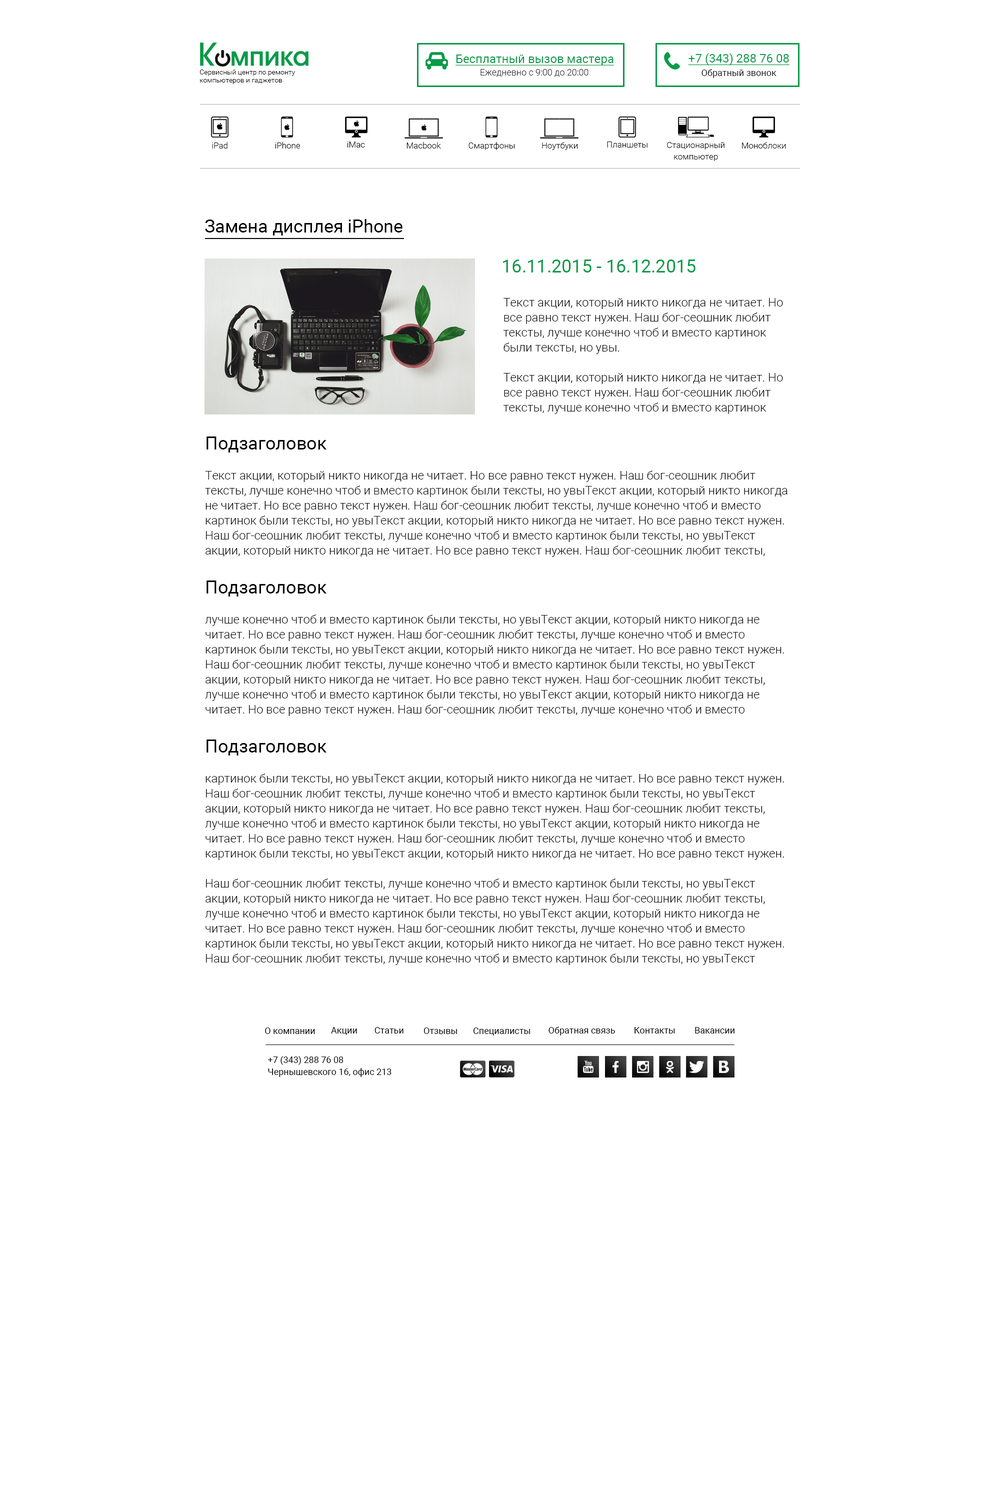
<style>
.page{position:relative;width:1000px;height:1500px;background:#ffffff}
.page>*{position:absolute;margin:0}
.t1{font:12px "Roboto-Regular";color:#099a48;text-decoration:underline}
.t2{font:7px/8px "Roboto-Light";color:#000000}
.t3{font:9px "Roboto-Light";color:#262626}
.t4{font:9px "Roboto-Regular";color:#1a1a1a}
.t5{font:8.5px "Roboto-Light";color:#000000}
.t6{font:8.5px/11.5px "Roboto-Light";color:#000000}
.t7{font:18px "Roboto-Regular";color:#000000}
.t8{font:18px "Roboto-Regular";color:#099a48}
.t9{font:12px/15px "Roboto-Light";color:#000000}
.t10{font:18px/24px "Roboto-Regular";color:#000000}
.t11{font:9px "Roboto-Regular";color:#000000}
</style>
<div class="page">
<p class="t1" style="left:688px;top:53px;width:102px;height:13px">+7 (343) 288 76 08</p>
<p class="t1" style="left:455px;top:54px;width:159px;height:12px">Бесплатный вызов мастера</p>
<p class="t2" style="left:200px;top:70px;width:96px;height:14px">Сервисный центр по ремонту<br>компьютеров и гаджетов</p>
<p class="t3" style="left:480px;top:69px;width:108px;height:8px">Ежедневно с 9:00 до 20:00</p>
<p class="t4" style="left:702px;top:69px;width:74px;height:9px">Обратный звонок</p>
<p class="t5" style="left:212px;top:142px;width:16px;height:6px">iPad</p>
<p class="t5" style="left:275px;top:142px;width:25px;height:6px">iPhone</p>
<p class="t5" style="left:347px;top:142px;width:18px;height:6px">iMac</p>
<p class="t5" style="left:406px;top:142px;width:35px;height:6px">Macbook</p>
<p class="t5" style="left:468px;top:142px;width:47px;height:8px">Смартфоны</p>
<p class="t5" style="left:542px;top:142px;width:36px;height:8px">Ноутбуки</p>
<p class="t5" style="left:607px;top:142px;width:41px;height:6px">Планшеты</p>
<p class="t6" style="left:667px;top:142px;width:57px;height:19px;text-align:center">Стационарный<br>компьютер</p>
<p class="t5" style="left:742px;top:142px;width:44px;height:6px">Моноблоки</p>
<p class="t7" style="left:205px;top:219px;width:197px;height:17px">Замена дисплея iPhone</p>
<p class="t8" style="left:503px;top:260px;width:193px;height:12px">16.11.2015 - 16.12.2015</p>
<p class="t9" style="left:503px;top:298px;width:280px;height:116px">Текст акции, который никто никогда не читает. Но все равно текст нужен. Наш бог-сеошник любит тексты, лучше конечно чтоб и вместо картинок были тексты, но увы.<br><br>Текст акции, который никто никогда не читает. Но все равно текст нужен. Наш бог-сеошник любит тексты, лучше конечно чтоб и вместо картинок были тексты, но увы</p>
<p class="t9" style="left:205px;top:436px;width:583px;height:529px"><span class="t10">Подзаголовок<br></span><br>Текст акции, который никто никогда не читает. Но все равно текст нужен. Наш бог-сеошник любит тексты, лучше конечно чтоб и вместо картинок были тексты, но увыТекст акции, который никто никогда не читает. Но все равно текст нужен. Наш бог-сеошник любит тексты, лучше конечно чтоб и вместо картинок были тексты, но увыТекст акции, который никто никогда не читает. Но все равно текст нужен. Наш бог-сеошник любит тексты, лучше конечно чтоб и вместо картинок были тексты, но увыТекст акции, который никто никогда не читает. Но все равно текст нужен. Наш бог-сеошник любит тексты, <br><br><span class="t10">Подзаголовок<br></span><br>лучше конечно чтоб и вместо картинок были тексты, но увыТекст акции, который никто никогда не читает. Но все равно текст нужен. Наш бог-сеошник любит тексты, лучше конечно чтоб и вместо картинок были тексты, но увыТекст акции, который никто никогда не читает. Но все равно текст нужен. Наш бог-сеошник любит тексты, лучше конечно чтоб и вместо картинок были тексты, но увыТекст акции, который никто никогда не читает. Но все равно текст нужен. Наш бог-сеошник любит тексты, лучше конечно чтоб и вместо картинок были тексты, но увыТекст акции, который никто никогда не читает. Но все равно текст нужен. Наш бог-сеошник любит тексты, лучше конечно чтоб и вместо <br><br><span class="t10">Подзаголовок<br></span><br>картинок были тексты, но увыТекст акции, который никто никогда не читает. Но все равно текст нужен. Наш бог-сеошник любит тексты, лучше конечно чтоб и вместо картинок были тексты, но увыТекст акции, который никто никогда не читает. Но все равно текст нужен. Наш бог-сеошник любит тексты, лучше конечно чтоб и вместо картинок были тексты, но увыТекст акции, который никто никогда не читает. Но все равно текст нужен. Наш бог-сеошник любит тексты, лучше конечно чтоб и вместо картинок были тексты, но увыТекст акции, который никто никогда не читает. Но все равно текст нужен. <br><br>Наш бог-сеошник любит тексты, лучше конечно чтоб и вместо картинок были тексты, но увыТекст акции, который никто никогда не читает. Но все равно текст нужен. Наш бог-сеошник любит тексты, лучше конечно чтоб и вместо картинок были тексты, но увыТекст акции, который никто никогда не читает. Но все равно текст нужен. Наш бог-сеошник любит тексты, лучше конечно чтоб и вместо картинок были тексты, но увыТекст акции, который никто никогда не читает. Но все равно текст нужен. Наш бог-сеошник любит тексты, лучше конечно чтоб и вместо картинок были тексты, но увыТекст акции, который никто никогда не читает. Но все равно текст нужен. Наш бог-сеошник любит тексты, лучше конечно чтоб и вместо картинок были тексты, но увыТекст акции, который никто никогда не читает. Но все равно текст нужен. Наш бог-сеошник любит тексты, лучше конечно чтоб и вместо картинок были тексты, но увыТекст акции, который никто никогда не читает. Но все равно текст нужен. Наш бог-сеошник любит тексты, лучше конечно чтоб и вместо картинок были тексты, но увыТекст акции, который никто никогда не читает. Но все равно текст нужен. Наш бог-сеошник любит тексты, лучше конечно чтоб и вместо картинок были тексты, но увыТекст акции, который никто никогда не читает. Но все равно текст нужен. Наш бог-сеошник любит тексты, лучше конечно чтоб и вместо картинок были тексты, но увы</p>
<p class="t11" style="left:265px;top:1028px;width:50px;height:6px">О компании</p>
<p class="t11" style="left:331px;top:1027px;width:26px;height:8px">Акции</p>
<p class="t11" style="left:374px;top:1027px;width:30px;height:7px">Статьи</p>
<p class="t11" style="left:424px;top:1028px;width:33px;height:6px">Отзывы</p>
<p class="t11" style="left:473px;top:1028px;width:57px;height:8px">Специалисты</p>
<p class="t11" style="left:548px;top:1026px;width:67px;height:10px">Обратная связь</p>
<p class="t11" style="left:634px;top:1027px;width:41px;height:7px">Контакты</p>
<p class="t11" style="left:695px;top:1027px;width:39px;height:7px">Вакансии</p>
<p class="t11" style="left:268px;top:1056px;width:76px;height:9px">+7 (343) 288 76 08</p>
<p class="t11" style="left:268px;top:1068px;width:124px;height:9px">Чернышевского 16, офис 213</p>
</div>
